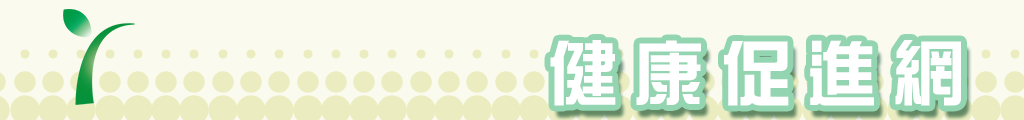
<style>
.page{position:relative;width:1024px;height:120px;background:#fafaee}
.page>*{position:absolute;margin:0}
.t1{font:72px "DFZongYiStd-W7";letter-spacing:0.2em;color:#ffffff}
</style>
<div class="page">
<p class="t1" style="left:550px;top:40px;width:411px;height:66px">健康促進網</p>
</div>
